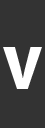
<style>
.page{position:relative;width:45px;height:128px;background:#333333}
.page>*{position:absolute;margin:0}
.t1{font:75px "AdobeGothicStd-Bold";color:#ffffff}
</style>
<div class="page">
<p class="t1" style="left:3px;top:47px;width:39px;height:42px">v</p>
</div>
